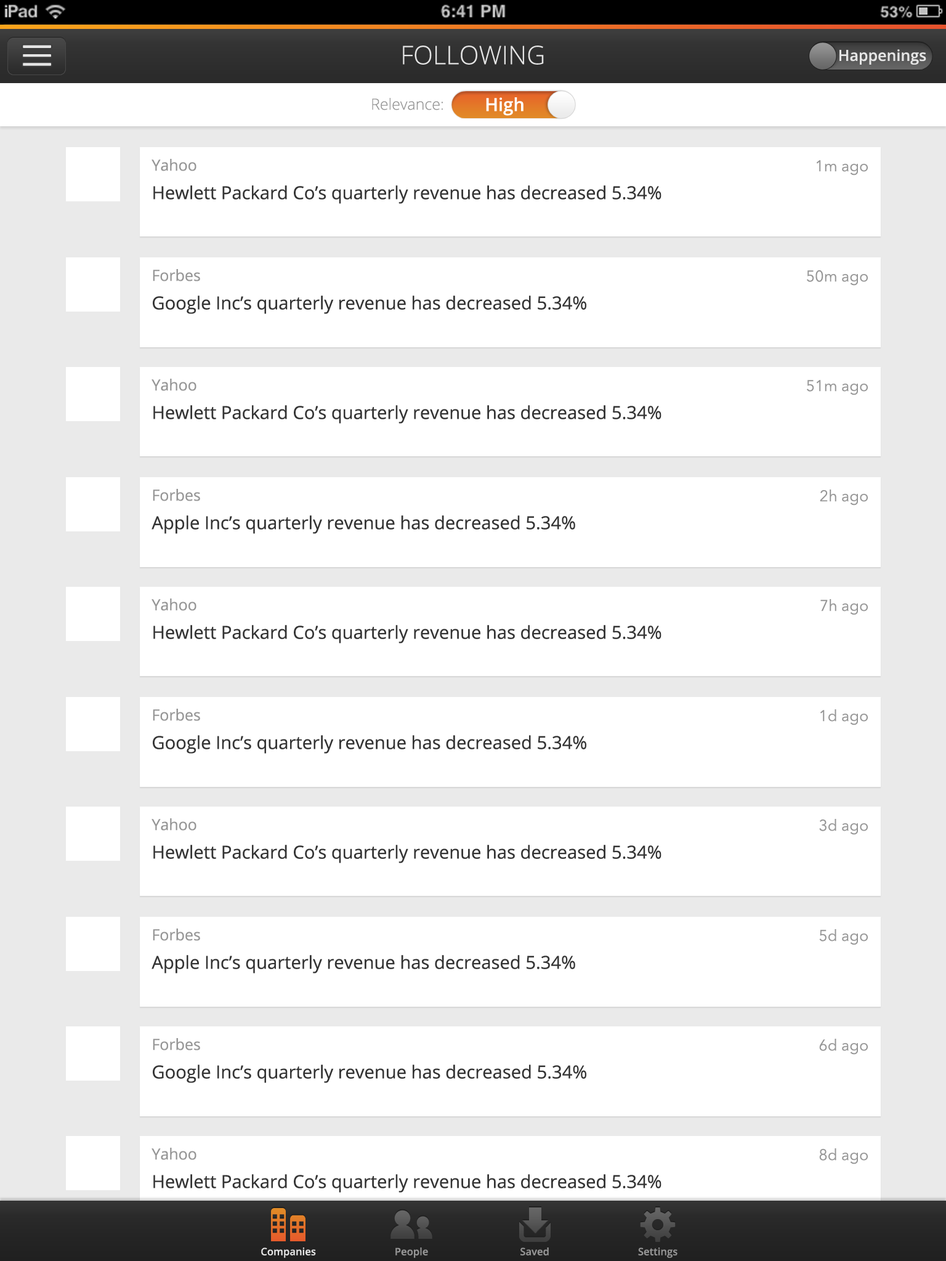
<style>
.page{position:relative;width:946px;height:1261px;background:#ffffff}
.page>*{position:absolute;margin:0}
.t1{font:25.7px "OpenSans-Light";color:#e5e5e5}
.t2{font:15.4px "OpenSans-Semibold";color:#e5e5e5}
.t3{font:15.4px "OpenSans-Light";color:#969696}
.t4{font:18px "OpenSans-Semibold";color:#ffffff}
.t5{font:18px "OpenSans";color:#343434}
.t6{font:15.4px "OpenSans";color:#969696}
.t7{font:15.4px "AvenirNext-Regular";color:#969696}
.t8{font:10.3px "OpenSans-Semibold";color:#e5e5e5}
.t9{font:10.3px "OpenSans-Semibold";color:#969696}
</style>
<div class="page">
<p class="t1" style="left:403px;top:46px;width:141px;height:19px">FOLLOWING</p>
<p class="t2" style="left:839px;top:49px;width:87px;height:16px">Happenings</p>
<p class="t3" style="left:372px;top:98px;width:71px;height:12px">Relevance:</p>
<p class="t4" style="left:486px;top:97px;width:37px;height:19px">High</p>
<p class="t5" style="left:151px;top:159px;width:510px;height:45px"><span class="t6">Yahoo<br></span>Hewlett Packard Co’s quarterly revenue has decreased 5.34%</p>
<p class="t7" style="left:816px;top:160px;width:51px;height:15px">1m ago</p>
<p class="t5" style="left:153px;top:269px;width:433px;height:45px"><span class="t6">Forbes<br></span>Google Inc’s quarterly revenue has decreased 5.34%</p>
<p class="t7" style="left:807px;top:270px;width:60px;height:16px">50m ago</p>
<p class="t5" style="left:151px;top:379px;width:510px;height:45px"><span class="t6">Yahoo<br></span>Hewlett Packard Co’s quarterly revenue has decreased 5.34%</p>
<p class="t7" style="left:807px;top:380px;width:60px;height:15px">51m ago</p>
<p class="t5" style="left:151px;top:489px;width:424px;height:45px"><span class="t6">Forbes<br></span>Apple Inc’s quarterly revenue has decreased 5.34%</p>
<p class="t7" style="left:819px;top:489px;width:48px;height:16px">2h ago</p>
<p class="t5" style="left:151px;top:598px;width:510px;height:45px"><span class="t6">Yahoo<br></span>Hewlett Packard Co’s quarterly revenue has decreased 5.34%</p>
<p class="t7" style="left:820px;top:599px;width:47px;height:16px">7h ago</p>
<p class="t5" style="left:153px;top:709px;width:433px;height:45px"><span class="t6">Forbes<br></span>Google Inc’s quarterly revenue has decreased 5.34%</p>
<p class="t7" style="left:820px;top:709px;width:47px;height:16px">1d ago</p>
<p class="t5" style="left:151px;top:818px;width:510px;height:45px"><span class="t6">Yahoo<br></span>Hewlett Packard Co’s quarterly revenue has decreased 5.34%</p>
<p class="t7" style="left:819px;top:819px;width:48px;height:16px">3d ago</p>
<p class="t5" style="left:151px;top:928px;width:424px;height:45px"><span class="t6">Forbes<br></span>Apple Inc’s quarterly revenue has decreased 5.34%</p>
<p class="t7" style="left:819px;top:929px;width:48px;height:16px">5d ago</p>
<p class="t5" style="left:153px;top:1038px;width:433px;height:45px"><span class="t6">Forbes<br></span>Google Inc’s quarterly revenue has decreased 5.34%</p>
<p class="t7" style="left:819px;top:1039px;width:48px;height:16px">6d ago</p>
<p class="t5" style="left:151px;top:1148px;width:510px;height:45px"><span class="t6">Yahoo<br></span>Hewlett Packard Co’s quarterly revenue has decreased 5.34%</p>
<p class="t7" style="left:819px;top:1148px;width:48px;height:16px">8d ago</p>
<p class="t8" style="left:261px;top:1247px;width:55px;height:11px">Companies</p>
<p class="t9" style="left:395px;top:1247px;width:33px;height:11px">People</p>
<p class="t9" style="left:520px;top:1247px;width:29px;height:8px">Saved</p>
<p class="t9" style="left:638px;top:1247px;width:39px;height:11px">Settings</p>
</div>
